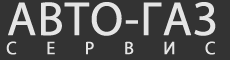
<style>
.page{position:relative;width:230px;height:60px;background:#333333}
.page>*{position:absolute;margin:0}
.t1{font:48px "MyriadPro-Regular";color:#e5e5e5;font-weight:bold}
.t2{font:18px "MyriadPro-Regular";letter-spacing:1.62em;color:#e5e5e5;text-transform:uppercase;font-weight:bold}
</style>
<div class="page">
<p class="t1" style="left:8px;top:2px;width:208px;height:34px">АВТО-ГАЗ</p>
<p class="t2" style="left:6px;top:41px;width:209px;height:14px">СЕРВИС</p>
</div>
